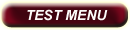
<style>
.page{position:relative;width:130px;height:30px}
.page>*{position:absolute;margin:0}
.t1{font:14px "Arial-BoldItalicMT";color:#fcfbf9}
</style>
<div class="page">
<p class="t1" style="left:27px;top:9px;width:81px;height:12px">TEST MENU</p>
</div>
